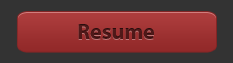
<style>
.page{position:relative;width:233px;height:63px;background:#333333}
.page>*{position:absolute;margin:0}
.t1{font:22px "MyriadPro-Bold";color:#4e1818}
</style>
<div class="page">
<p class="t1" style="left:78px;top:24px;width:76px;height:15px">Resume</p>
</div>
